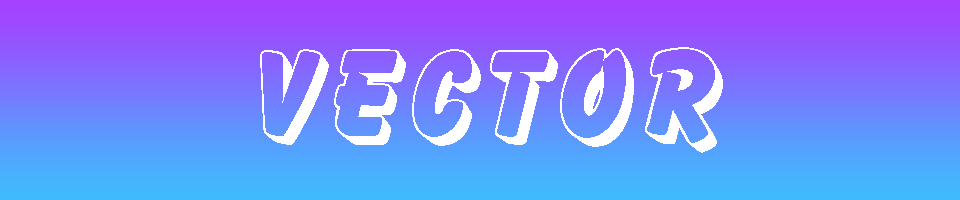
<style>
.page{position:relative;width:960px;height:200px}
.page>*{position:absolute;margin:0}
.t1{font:144px "BalloonDroShaD";letter-spacing:0.05em;color:#ffffff;text-transform:uppercase}
</style>
<div class="page">
<p class="t1" style="left:260px;top:47px;width:463px;height:106px">Vector</p>
</div>
